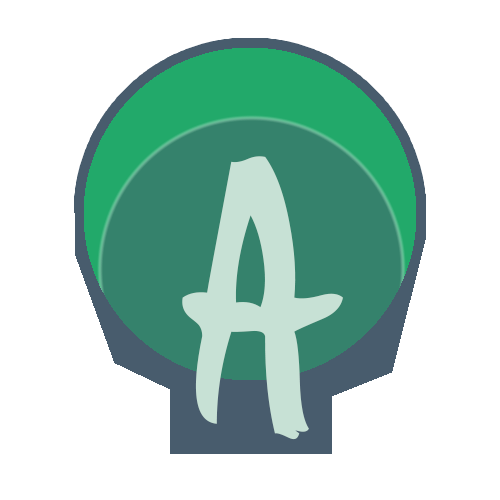
<style>
.page{position:relative;width:500px;height:500px;background:#ffffff}
.page>*{position:absolute;margin:0}
.t1{font:420px "BadHandwriting7.2";color:#c7e1d5}
</style>
<div class="page">
<p class="t1" style="left:182px;top:156px;width:161px;height:284px">A</p>
</div>
